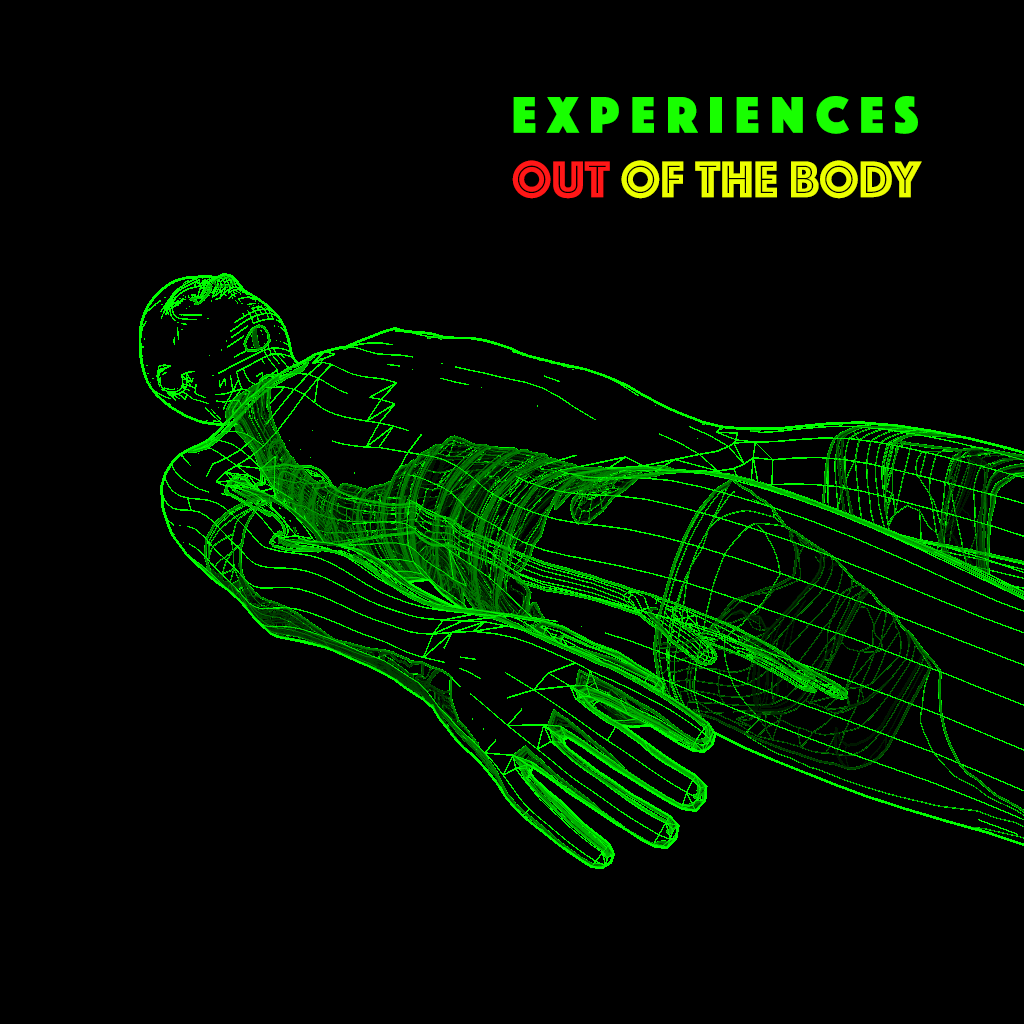
<style>
.page{position:relative;width:1024px;height:1024px;background:#000000}
.page>*{position:absolute;margin:0}
.t1{font:53.8px "Phosphate-Solid";letter-spacing:0.2em;color:#18ff00}
.t2{font:53.8px "Phosphate-Inline";color:#ff1717}
.t3{font:53.8px "Phosphate-Inline";color:#ecff00}
</style>
<div class="page">
<p class="t1" style="left:512px;top:96px;width:410px;height:103px">EXPERIENCES<br><span class="t2">OUT </span><span class="t3">OF THE BODY</span></p>
</div>
